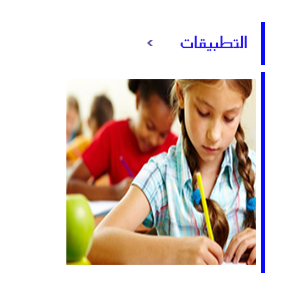
<style>
.page{position:relative;width:295px;height:293px;background:#ffffff}
.page>*{position:absolute;margin:0}
.t1{font:20px "SC_KHALID";color:#2b16f5}
</style>
<div class="page">
<p class="t1" style="left:180px;top:35px;width:67px;height:17px">التطبيقات</p>
</div>
